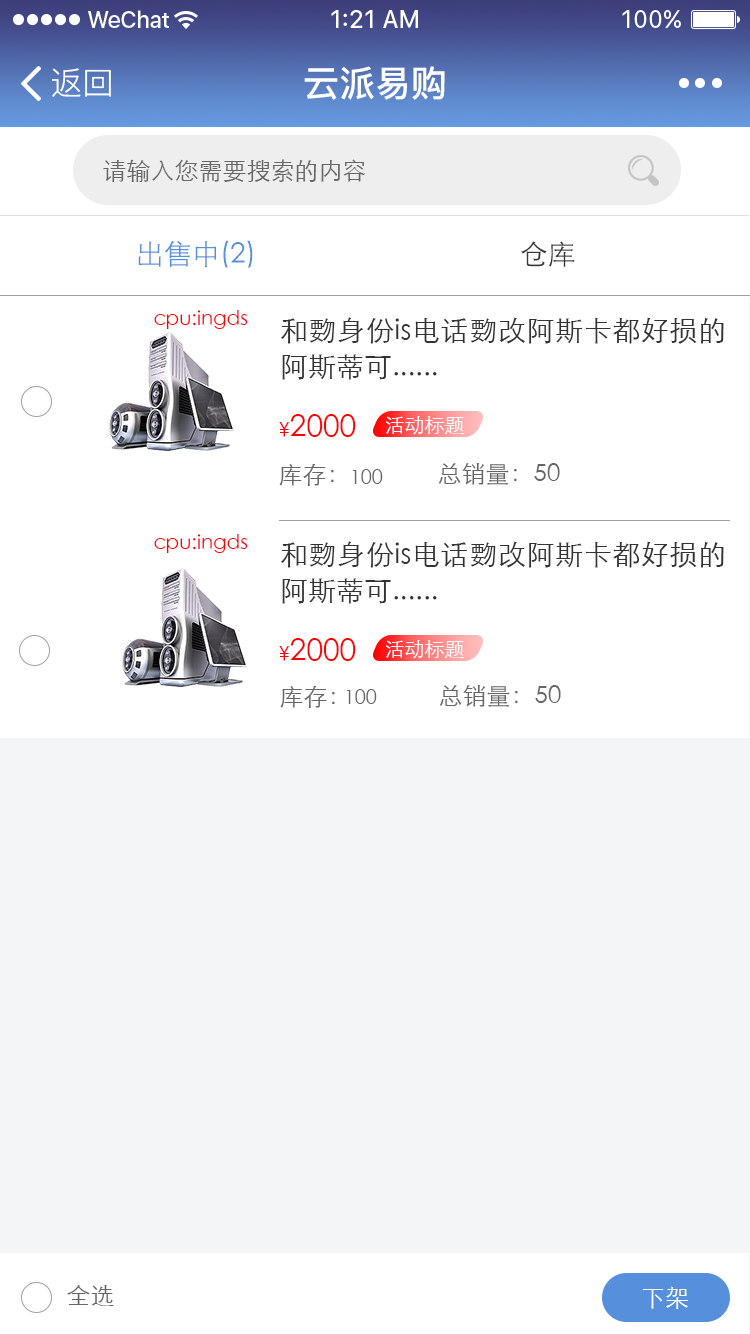
<style>
.page{position:relative;width:750px;height:1334px;background:#ffffff}
.page>*{position:absolute;margin:0}
.t1{font:32px "PingFang-SC-Regular";color:#ffffff}
.t2{font:36px "PingFang-SC-Bold";color:#ffffff}
.t3{font:24px "STXihei";color:#666666}
.t4{font:28px "STXihei";color:#568fdc}
.t5{font:28px "STXihei";color:#373737}
.t6{font:20px "STXihei";color:#ff0000}
.t7{font:28px/36px "STXihei";color:#333333}
.t8{font:30px "STXihei";color:#ff0000}
.t9{font:20px "STXihei";color:#ffffff}
.t10{font:20px "STXihei";color:#666666}
.t11{font:24px "STXihei";color:#ffffff}
</style>
<div class="page">
<p class="t1" style="left:52px;top:68px;width:59px;height:29px">返回</p>
<p class="t2" style="left:304px;top:66px;width:141px;height:34px">云派易购</p>
<p class="t3" style="left:103px;top:159px;width:262px;height:23px">请输入您需要搜索的内容</p>
<p class="t4" style="left:138px;top:240px;width:115px;height:28px">出售中(2)</p>
<p class="t5" style="left:521px;top:241px;width:54px;height:26px">仓库</p>
<p class="t6" style="left:154px;top:310px;width:94px;height:19px">cpu:ingds</p>
<p class="t7" style="left:281px;top:317px;width:443px;height:63px;text-align:justify">和覅身份is电话覅改阿斯卡都好损的阿斯蒂可......</p>
<p class="t8" style="left:279px;top:414px;width:77px;height:23px"><span class="t6">¥</span>2000</p>
<p class="t9" style="left:386px;top:416px;width:78px;height:19px">活动标题</p>
<p class="t3" style="left:279px;top:464px;width:55px;height:22px">库存：</p>
<p class="t10" style="left:352px;top:469px;width:31px;height:15px">100</p>
<p class="t3" style="left:438px;top:463px;width:122px;height:22px">总销量：50</p>
<p class="t6" style="left:154px;top:534px;width:94px;height:19px">cpu:ingds</p>
<p class="t7" style="left:281px;top:541px;width:443px;height:63px;text-align:justify">和覅身份is电话覅改阿斯卡都好损的阿斯蒂可......</p>
<p class="t8" style="left:279px;top:638px;width:77px;height:23px"><span class="t6">¥</span>2000</p>
<p class="t9" style="left:386px;top:640px;width:78px;height:19px">活动标题</p>
<p class="t3" style="left:280px;top:686px;width:55px;height:22px">库存：</p>
<p class="t10" style="left:346px;top:689px;width:31px;height:15px">100</p>
<p class="t3" style="left:439px;top:685px;width:122px;height:22px">总销量：50</p>
<p class="t3" style="left:67px;top:1285px;width:47px;height:21px">全选</p>
<p class="t11" style="left:642px;top:1286px;width:46px;height:23px">下架</p>
</div>
